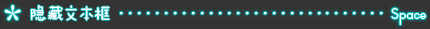
<style>
.page{position:relative;width:430px;height:29px;background:#333333}
.page>*{position:absolute;margin:0}
.t1{font:18px "¢è?";color:#ffffff}
</style>
<div class="page">
<p class="t1" style="left:30px;top:5px;width:80px;height:16px">隐藏文本框</p>
</div>
